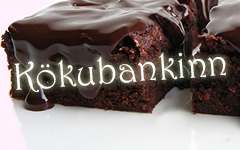
<style>
.page{position:relative;width:240px;height:150px}
.page>*{position:absolute;margin:0}
.t1{font:38px "Harrington";color:#fcfcfc}
</style>
<div class="page">
<p class="t1" style="left:14px;top:52px;width:212px;height:40px;rotate:-4deg">Kökubankinn</p>
</div>
